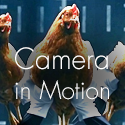
<style>
.page{position:relative;width:125px;height:125px}
.page>*{position:absolute;margin:0}
.t1{font:24.6px "FuturaLT-Light";color:#ffffff}
.t2{font:28.5px "FuturaLT-Light";color:#ffffff}
</style>
<div class="page">
<p class="t1" style="left:15px;top:47px;width:94px;height:53px"><span class="t2">Camera<br></span>in Motion</p>
</div>
